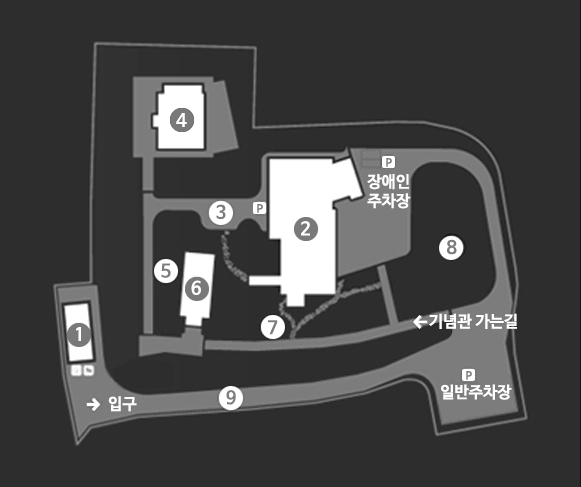
<style>
.page{position:relative;width:581px;height:487px;background:#2d2d2d}
.page>*{position:absolute;margin:0}
.t1{font:18px "NanumBarunGothicBold";color:#ffffff}
.t2{font:11px "NanumBarunGothicBold";color:#7c7c7c}
.t3{font:16px "NanumBarunGothicBold";color:#ffffff}
.t4{font:18px "NanumBarunGothicBold";color:#7c7c7c}
.t5{font:18px "NanumBarunGothicBold";color:#7d7d7d}
</style>
<div class="page">
<p class="t1" style="left:176px;top:113px;width:11px;height:14px">4</p>
<p class="t2" style="left:386px;top:158px;width:6px;height:9px">P</p>
<p class="t3" style="left:367px;top:174px;width:44px;height:35px">장애인<br>주차장</p>
<p class="t4" style="left:216px;top:204px;width:10px;height:16px">3</p>
<p class="t2" style="left:257px;top:204px;width:6px;height:9px">P</p>
<p class="t1" style="left:301px;top:221px;width:9px;height:15px">2</p>
<p class="t4" style="left:446px;top:239px;width:11px;height:16px">8</p>
<p class="t4" style="left:161px;top:263px;width:10px;height:15px">5</p>
<p class="t1" style="left:191px;top:280px;width:10px;height:15px">6</p>
<p class="t3" style="left:429px;top:313px;width:88px;height:16px">기념관 가는길</p>
<p class="t1" style="left:76px;top:327px;width:5px;height:14px">1</p>
<p class="t4" style="left:268px;top:320px;width:10px;height:15px">7</p>
<p class="t2" style="left:466px;top:371px;width:6px;height:9px">P</p>
<p class="t5" style="left:226px;top:390px;width:10px;height:15px">9</p>
<p class="t3" style="left:441px;top:384px;width:71px;height:16px">일반주차장</p>
<p class="t3" style="left:108px;top:396px;width:29px;height:16px">입구</p>
</div>
